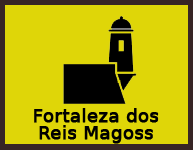
<style>
.page{position:relative;width:193px;height:150px;background:#dfd608}
.page>*{position:absolute;margin:0}
.t1{font:18px/18px "BitstreamVeraSans-Roman";color:#000000;font-weight:bold}
</style>
<div class="page">
<p class="t1" style="left:34px;top:108px;width:125px;height:36px;text-align:center">Fortaleza dos<br>Reis Magoss</p>
</div>
